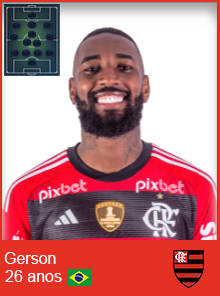
<style>
.page{position:relative;width:220px;height:296px;background:#ffffff}
.page>*{position:absolute;margin:0}
.t1{font:16px "ArialMT";color:#ffffff}
</style>
<div class="page">
<p class="t1" style="left:4px;top:252px;width:52px;height:12px">Gerson</p>
<p class="t1" style="left:5px;top:270px;width:57px;height:12px">26 anos</p>
</div>
